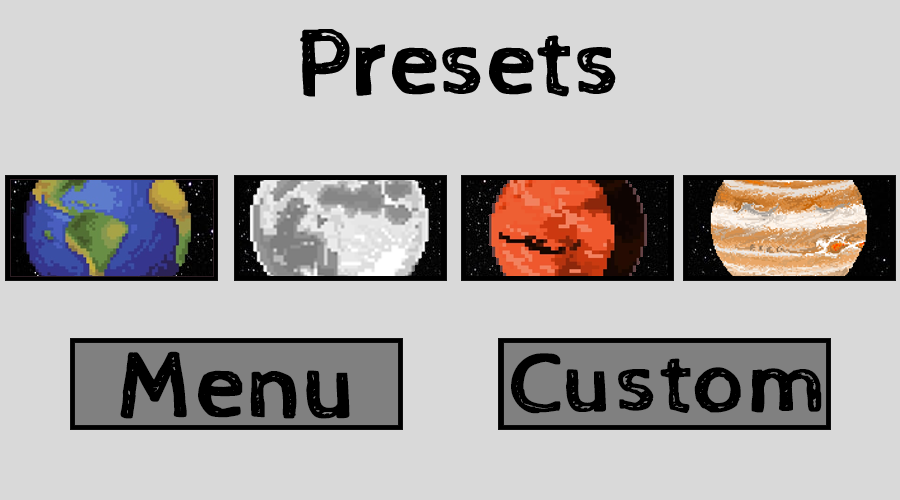
<style>
.page{position:relative;width:900px;height:500px;background:#d9d9d9}
.page>*{position:absolute;margin:0}
.t1{font:96px "CabinSketch-Regular";color:#000000;font-weight:bold}
.t2{font:86px "CabinSketch-Regular";color:#000000;font-weight:bold;scale:1.04 1}
</style>
<div class="page">
<p class="t1" style="left:120px;top:351px;width:230px;height:68px">Menu</p>
<p class="t2" style="left:511px;top:353px;width:311px;height:61px">Custom</p>
</div>
